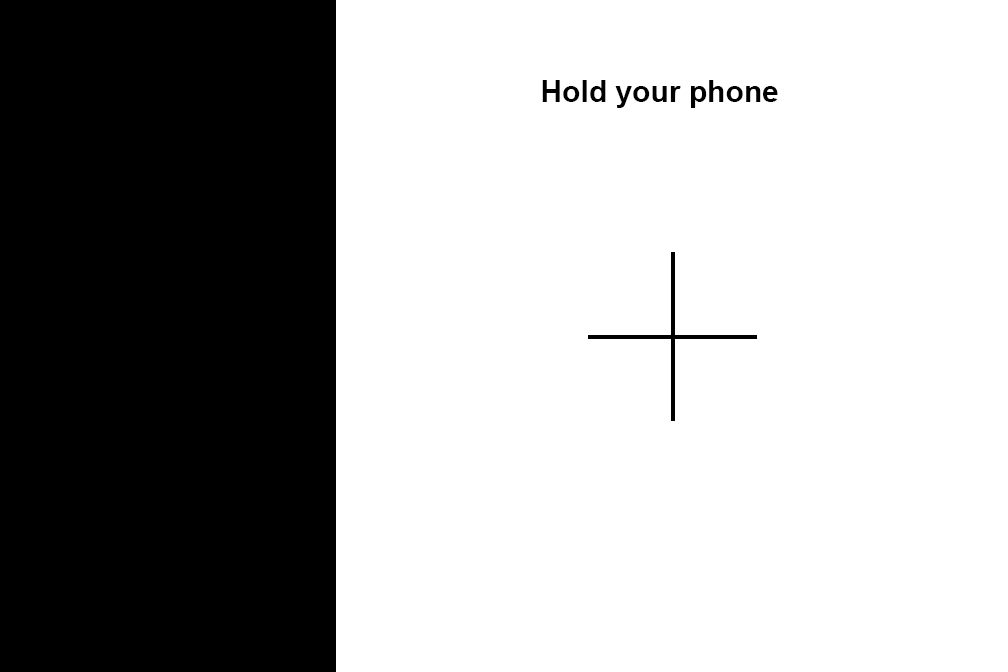
<style>
.page{position:relative;width:1008px;height:672px;background:#ffffff}
.page>*{position:absolute;margin:0}
.t1{font:30px "Arial-BoldMT";color:#000000}
</style>
<div class="page">
<p class="t1" style="left:542px;top:80px;width:236px;height:28px">Hold your phone</p>
</div>
